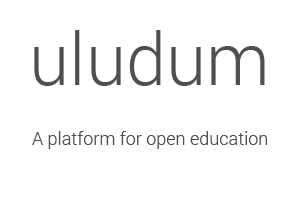
<style>
.page{position:relative;width:300px;height:200px;background:#ffffff}
.page>*{position:absolute;margin:0}
.t1{font:72px "Roboto-Light";color:#4f4f4f}
.t2{font:18px "Roboto-Light";color:#4f4f4f}
</style>
<div class="page">
<p class="t1" style="left:34px;top:30px;width:231px;height:56px">uludum</p>
<p class="t2" style="left:32px;top:131px;width:235px;height:18px">A platform for open education</p>
</div>
